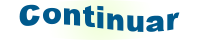
<style>
.page{position:relative;width:200px;height:40px;background:#ffffff}
.page>*{position:absolute;margin:0}
.t1{font:30px "Arial-Black";color:#005a8d}
</style>
<div class="page">
<p class="t1" style="left:19px;top:4px;width:161px;height:28px">Continuar</p>
</div>
